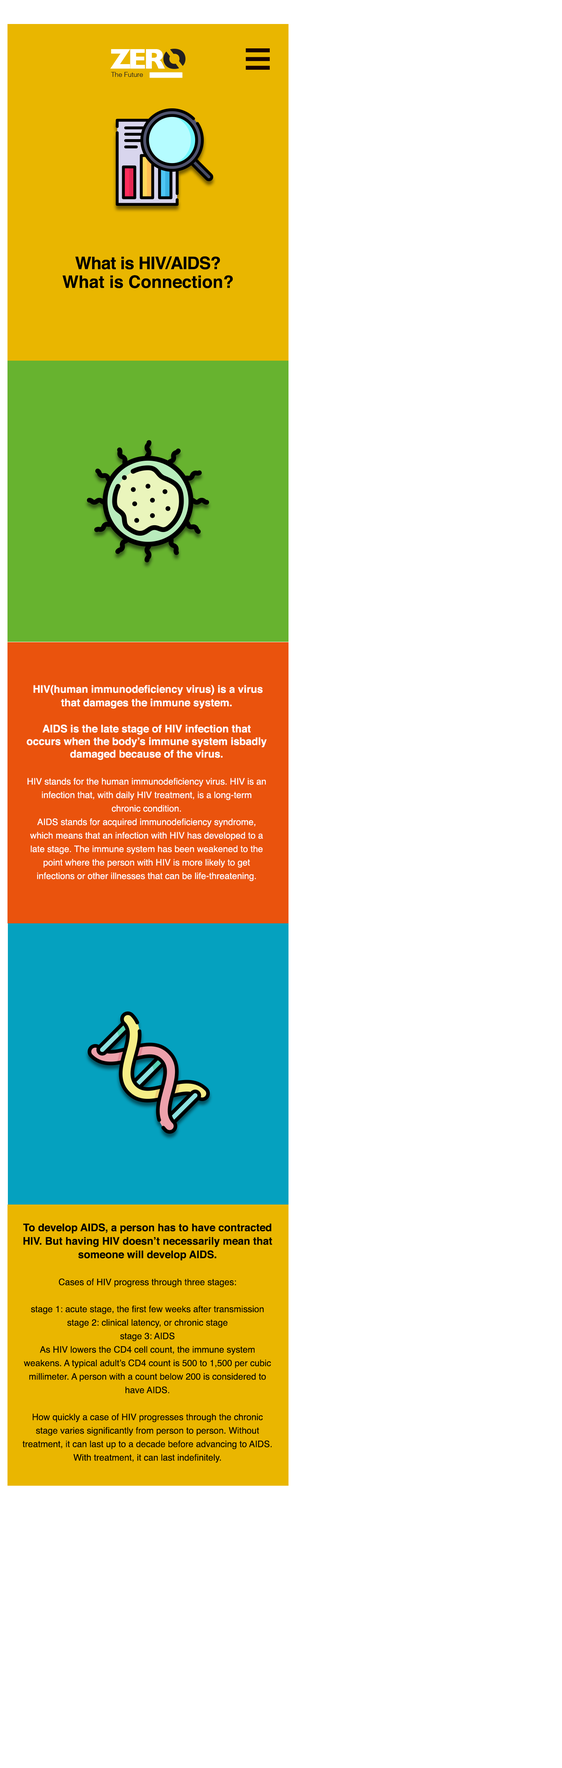
<style>
.page{position:relative;width:562px;height:1768px;background:#ffffff}
.page>*{position:absolute;margin:0}
.t1{font:17.2px/18.8px "Helvetica-Bold";color:#000000}
.t2{font:17.2px/13.5px "Helvetica-Bold";letter-spacing:-0.02em;color:#000000}
.t3{font:9px/13.5px "Helvetica";color:#ffffff}
.t4{font:9px "Helvetica";color:#ffffff}
.t5{font:10.5px/13.5px "Helvetica-Bold";color:#ffffff}
.t6{font:10.5px "Helvetica-Bold";color:#ffffff}
.t7{font:9px/13.5px "Helvetica";color:#000000}
.t8{font:10.5px/13.5px "Helvetica-Bold";color:#000000}
</style>
<div class="page">
<p class="t1" style="left:62px;top:256px;width:171px;height:32px;text-align:center"><span class="t2">What is HIV/AIDS?<br></span>What is Connection?</p>
<p class="t3" style="left:27px;top:685px;width:240px;height:196px;text-align:center"><span class="t4"> </span><span class="t5">HIV</span><span class="t6">(human immunodeficiency virus)</span><span class="t5"> is a virus that damages the immune system.   <br><br></span><span class="t6">AIDS is the late stage of HIV infection that occurs when the body’s immune system isbadly damaged because of the virus.<br></span><br>HIV stands for the human immunodeficiency virus. HIV is an infection that, with daily HIV treatment, is a long-term <br>chronic condition.<br>AIDS stands for acquired immunodeficiency syndrome, which means that an infection with HIV has developed to a late stage. The immune system has been weakened to the point where the person with HIV is more likely to get <br>infections or other illnesses that can be life-threatening.</p>
<p class="t7" style="left:22px;top:1223px;width:251px;height:240px;text-align:center"><span class="t8">To develop AIDS, a person has to have contracted HIV. But having HIV doesn’t necessarily mean that someone will develop AIDS.<br></span><br>Cases of HIV progress through three stages:<br><br>stage 1: acute stage, the first few weeks after transmission<br>stage 2: clinical latency, or chronic stage<br>stage 3: AIDS<br>As HIV lowers the CD4 cell count, the immune system <br>weakens. A typical adult’s CD4 count is 500 to 1,500 per cubic millimeter. A person with a count below 200 is considered to have AIDS.<br><br>How quickly a case of HIV progresses through the chronic stage varies significantly from person to person. Without <br>treatment, it can last up to a decade before advancing to AIDS. With treatment, it can last indefinitely.</p>
</div>
